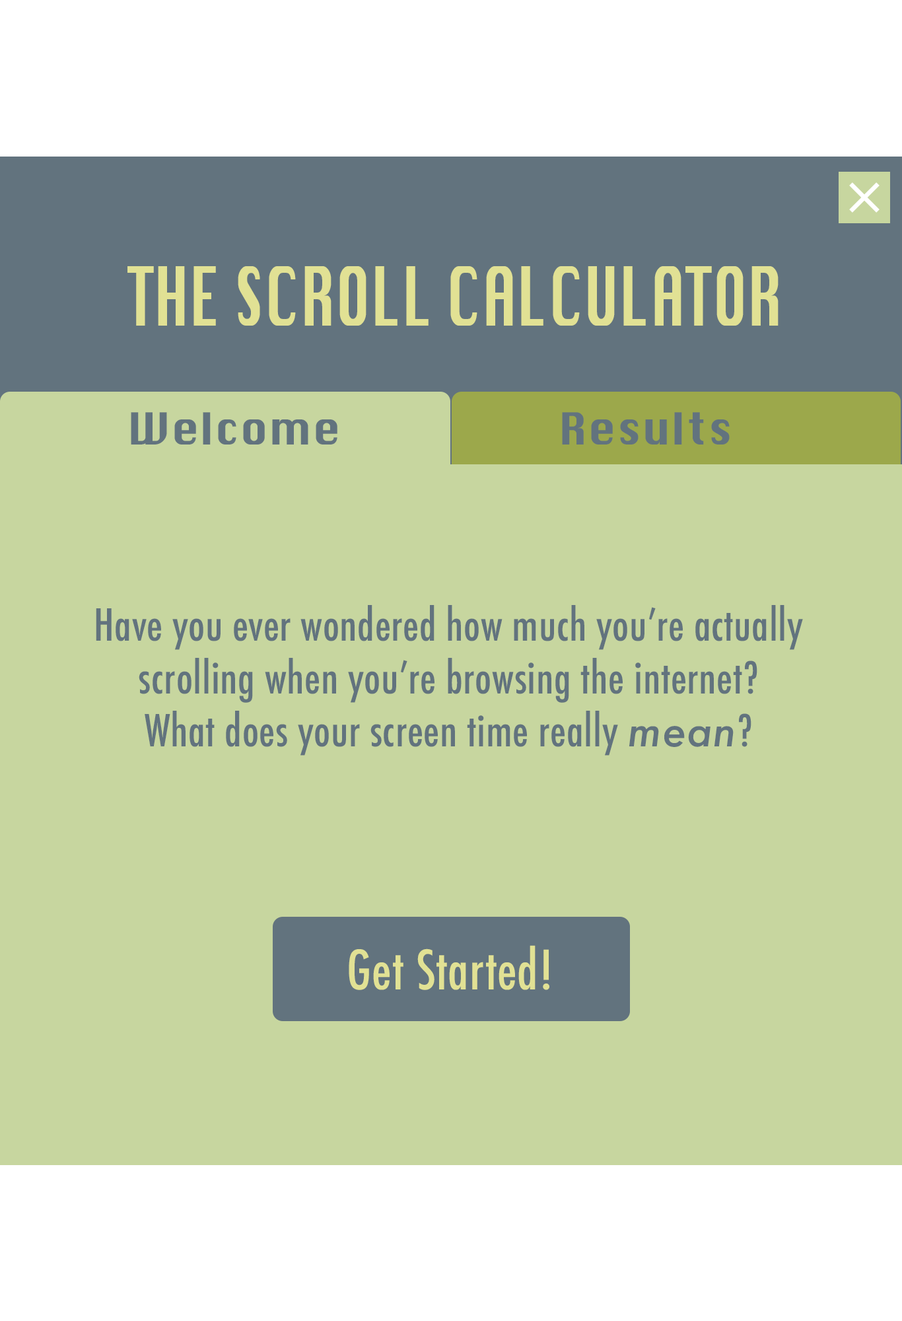
<style>
.page{position:relative;width:902px;height:1321px;background:#c7d69f}
.page>*{position:absolute;margin:0}
.t1{font:79.3px "Krungthep";letter-spacing:0.01em;color:#e1e194;scale:0.66 1}
.t2{font:42.9px "Krungthep";letter-spacing:0.01em;color:#62737e}
.t3{font:42.9px/52.9px "Futura-CondensedMedium";letter-spacing:0.01em;color:#62737e}
.t4{font:42.9px/52.9px "Futura-MediumItalic";letter-spacing:0.01em;color:#62737e}
.t5{font:52.9px "Futura-CondensedMedium";letter-spacing:0.01em;color:#e1e194}
</style>
<div class="page">
<p class="t1" style="left:128px;top:266px;width:651px;height:60px">THE SCROLL CALCULATOR</p>
<p class="t2" style="left:131px;top:412px;width:207px;height:33px">Welcome</p>
<p class="t2" style="left:562px;top:412px;width:168px;height:33px">Results</p>
<p class="t3" style="left:96px;top:605px;width:707px;height:151px;text-align:center">Have you ever wondered how much you’re actually scrolling when you’re browsing the internet?<br>What does your screen time really <span class="t4">mean</span>?</p>
<p class="t5" style="left:349px;top:945px;width:201px;height:45px">Get Started!</p>
</div>
